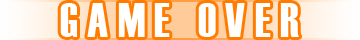
<style>
.page{position:relative;width:360px;height:40px;background:#ffffff}
.page>*{position:absolute;margin:0}
.t1{font:48px "Haettenschweiler";letter-spacing:0.2em;color:#ffffff}
</style>
<div class="page">
<p class="t1" style="left:60px;top:3px;width:240px;height:34px">GAME OVER</p>
</div>
